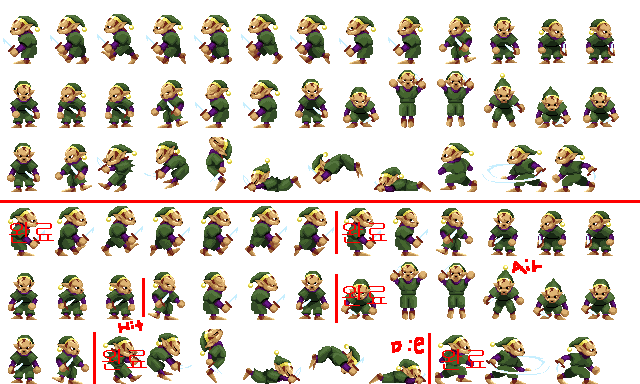
<style>
.page{position:relative;width:640px;height:384px;background:#ffffff}
.page>*{position:absolute;margin:0}
.t1{font:24px "Gulim";color:#ff0000}
</style>
<div class="page">
<p class="t1" style="left:9px;top:222px;width:45px;height:21px">완료</p>
<p class="t1" style="left:342px;top:222px;width:45px;height:21px">완료</p>
<p class="t1" style="left:342px;top:285px;width:45px;height:21px">완료</p>
<p class="t1" style="left:102px;top:349px;width:45px;height:21px">완료</p>
<p class="t1" style="left:441px;top:349px;width:45px;height:21px">완료</p>
</div>
